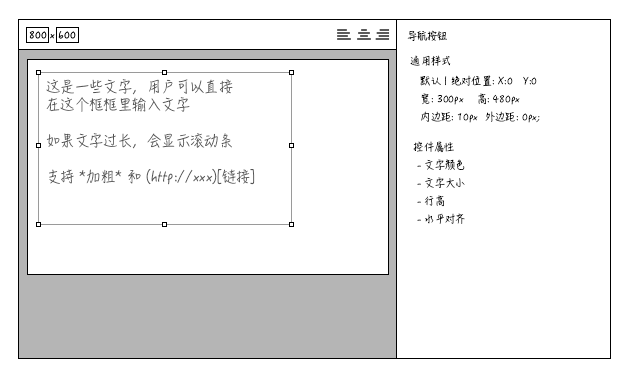
<style>
.page{position:relative;width:631px;height:380px;background:#ffffff}
.page>*{position:absolute;margin:0}
.t1{font:10px "HanziPenSC-W3";color:#000000}
.t2{font:10px/18px "HanziPenSC-W3";color:#000000}
.t3{font:10px/14px "HanziPenSC-W3";color:#000000}
.t4{font:14px/18px "HanziPenSC-W3";color:#535353}
</style>
<div class="page">
<p class="t1" style="left:407px;top:30px;width:40px;height:11px">导航按钮</p>
<p class="t1" style="left:410px;top:55px;width:41px;height:11px">通用样式</p>
<p class="t2" style="left:420px;top:75px;width:120px;height:48px"><span class="t3">默认 | 绝对位置: X:0   Y:0<br></span>宽: 300px    高: 480px<br>内边距: 10px  外边距: 0px;</p>
<p class="t4" style="left:46px;top:79px;width:209px;height:106px">这是一些文字，用户可以直接<br>在这个框框里输入文字<br><br>如果文字过长，会显示滚动条<br><br>支持 *加粗* 和 (http://xxx)[链接]</p>
<p class="t2" style="left:413px;top:141px;width:52px;height:83px">控件属性<br> - 文字颜色<br> - 文字大小<br> - 行高<br> - 水平对齐</p>
</div>
